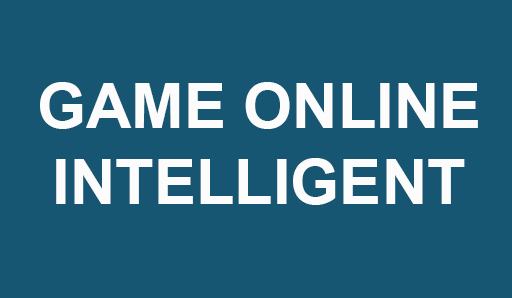
<style>
.page{position:relative;width:512px;height:298px;background:#175672}
.page>*{position:absolute;margin:0}
.t1{font:63px "Arial-BoldMT";color:#fcfcfc}
</style>
<div class="page">
<p class="t1" style="left:40px;top:82px;width:438px;height:123px;text-align:center">GAME ONLINE<br>INTELLIGENT</p>
</div>
